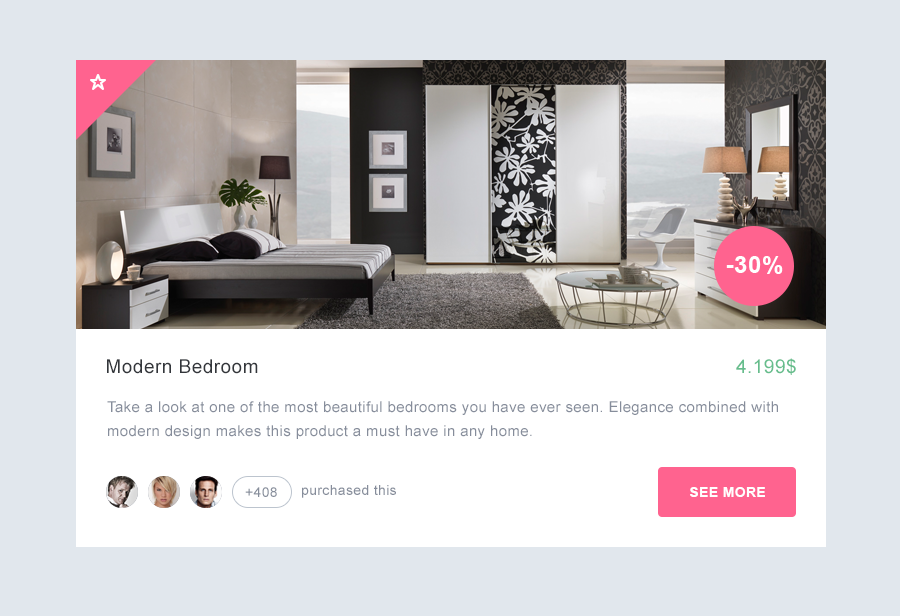
<style>
.page{position:relative;width:900px;height:616px;background:#e1e7ed}
.page>*{position:absolute;margin:0}
.t1{font:24px "Arial-BoldMT";letter-spacing:0.025em;color:#ffffff}
.t2{font:24px "ArialMT";letter-spacing:0.025em;color:#ffffff}
.t3{font:19px "ArialMT";letter-spacing:0.025em;color:#33363b}
.t4{font:19px "ArialMT";letter-spacing:0.025em;color:#65bd8c}
.t5{font:15px/24px "ArialMT";letter-spacing:0.025em;color:#868d9b}
.t6{font:14px "ArialMT";letter-spacing:0.025em;color:#868d9b}
.t7{font:14px "Arial-BoldMT";letter-spacing:0.025em;color:#ffffff}
</style>
<div class="page">
<p class="t1" style="left:726px;top:256px;width:57px;height:18px"><span class="t2">      </span>-30%</p>
<p class="t3" style="left:107px;top:359px;width:151px;height:15px">Modern Bedroom</p>
<p class="t4" style="left:736px;top:358px;width:60px;height:17px">4.199$</p>
<p class="t5" style="left:107px;top:401px;width:671px;height:38px">Take a look at one of the most beautiful bedrooms you have ever seen. Elegance combined with modern design makes this product a must have in any home.</p>
<p class="t6" style="left:302px;top:485px;width:94px;height:13px">purchased this</p>
<p class="t6" style="left:245px;top:487px;width:32px;height:10px">+408</p>
<p class="t7" style="left:690px;top:487px;width:75px;height:10px">SEE MORE</p>
</div>
